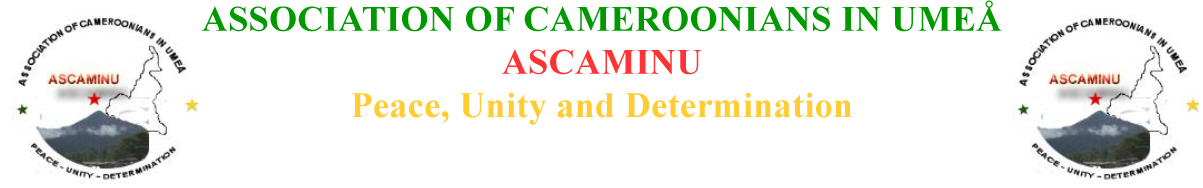
<style>
.page{position:relative;width:1203px;height:188px;background:#ffffff}
.page>*{position:absolute;margin:0}
.t1{font:36px "TimesNewRomanPS-BoldMT";letter-spacing:0.01em;color:#009900}
.t2{font:36px "TimesNewRomanPS-BoldMT";letter-spacing:0.01em;color:#ff3333}
.t3{font:36px "TimesNewRomanPS-BoldMT";letter-spacing:0.01em;color:#ffcc33}
</style>
<div class="page">
<p class="t1" style="left:202px;top:0px;width:800px;height:125px;text-align:center">ASSOCIATION OF CAMEROONIANS IN UMEÅ<br><span class="t2">ASCAMINU<br></span><span class="t3">Peace, Unity and Determination</span></p>
</div>
